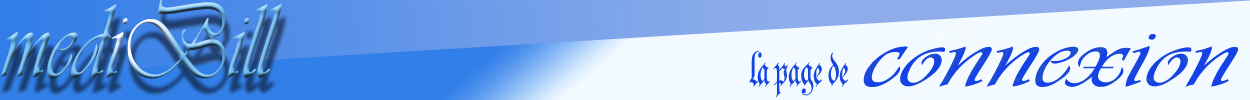
<style>
.page{position:relative;width:1250px;height:100px;background:#f2faff}
.page>*{position:absolute;margin:0}
.t1{font:110.1px "Vivaldii";scale:0.78 1}
.t2{font:96.1px "Vivaldii";color:#1e4ed0;scale:1.27 1}
.t3{font:80.6px "Parchment-Regular";color:#1e4ed0;scale:0.73 1}
</style>
<div class="page">
<p class="t1" style="left:0px;top:0px;width:282px;height:79px">mediBill</p>
<p class="t2" style="left:863px;top:34px;width:375px;height:53px">connexion</p>
<p class="t3" style="left:749px;top:51px;width:99px;height:47px">la page de</p>
</div>
